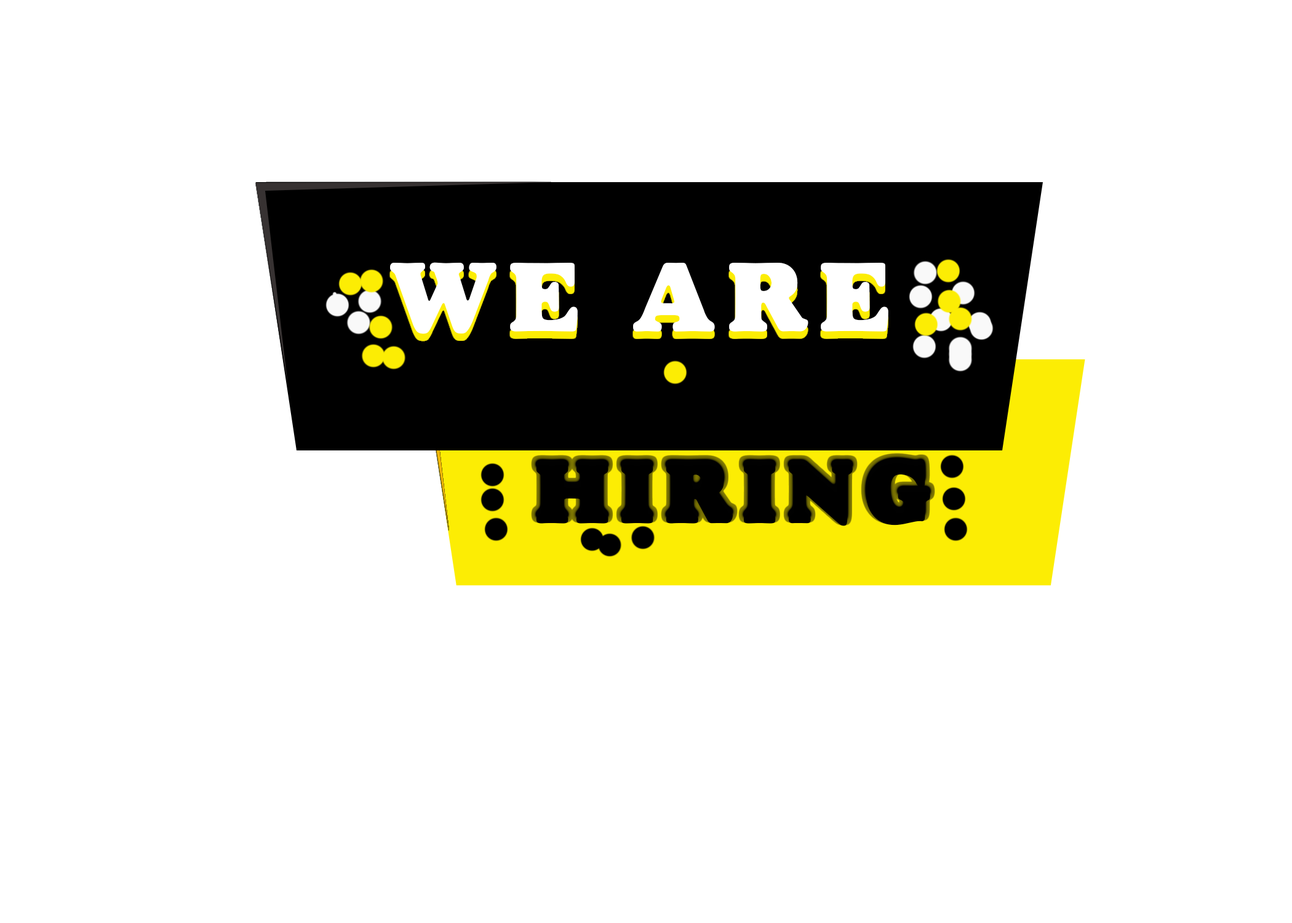
<style>
.page{position:relative;width:1292px;height:923px;background:#ffffff}
.page>*{position:absolute;margin:0}
.t1{font:175.1px "AlfredoHeavy";letter-spacing:0.13em;color:#ffffff}
.t2{font:147.5px "AlfredoHeavy";letter-spacing:0.13em;color:#000000}
</style>
<div class="page">
<p class="t1" style="left:390px;top:262px;width:498px;height:72px">WE ARE</p>
<p class="t2" style="left:536px;top:463px;width:394px;height:63px">HIRING</p>
</div>
